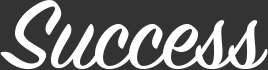
<style>
.page{position:relative;width:268px;height:70px;background:#333333}
.page>*{position:absolute;margin:0}
.t1{font:109px "SignPainter-HouseScript";color:#ffffff}
</style>
<div class="page">
<p class="t1" style="left:0px;top:0px;width:268px;height:70px">Success</p>
</div>
